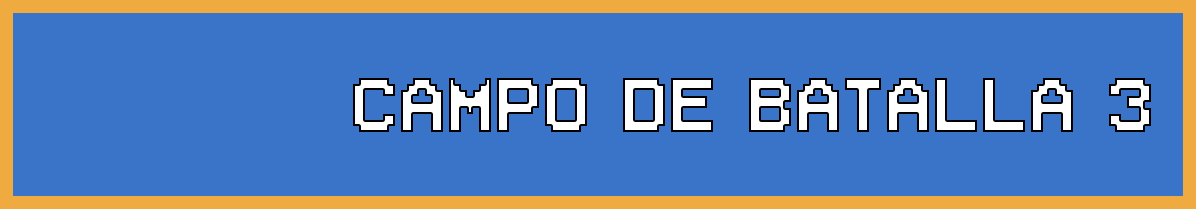
<style>
.page{position:relative;width:1196px;height:209px;background:#3a74c9}
.page>*{position:absolute;margin:0}
.t1{font:96px "Superstar";color:#ffffff}
</style>
<div class="page">
<p class="t1" style="left:353px;top:78px;width:798px;height:54px">campo de batalla 3</p>
</div>
